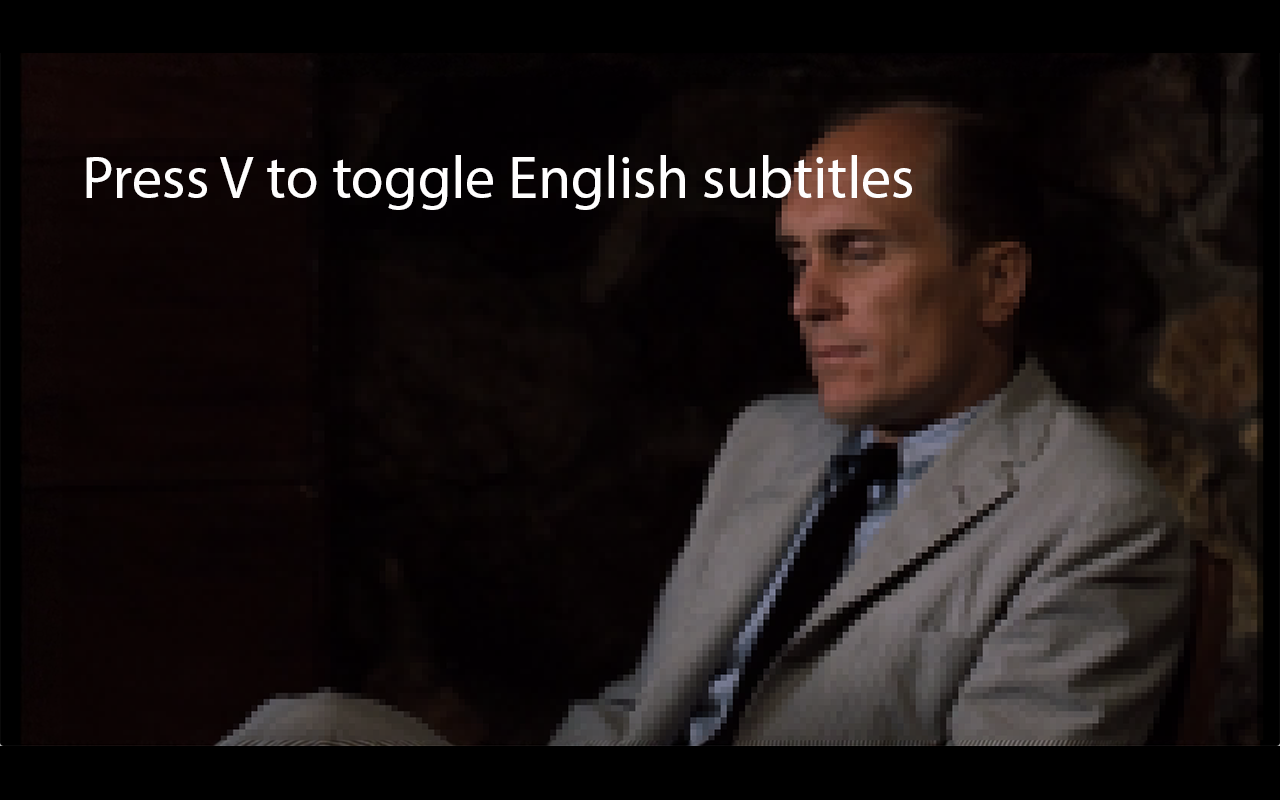
<style>
.page{position:relative;width:1280px;height:800px}
.page>*{position:absolute;margin:0}
.t1{font:60px "MyriadPro-Regular";color:#fffefe}
</style>
<div class="page">
<p class="t1" style="left:86px;top:155px;width:826px;height:55px">Press V to toggle English subtitles</p>
</div>
